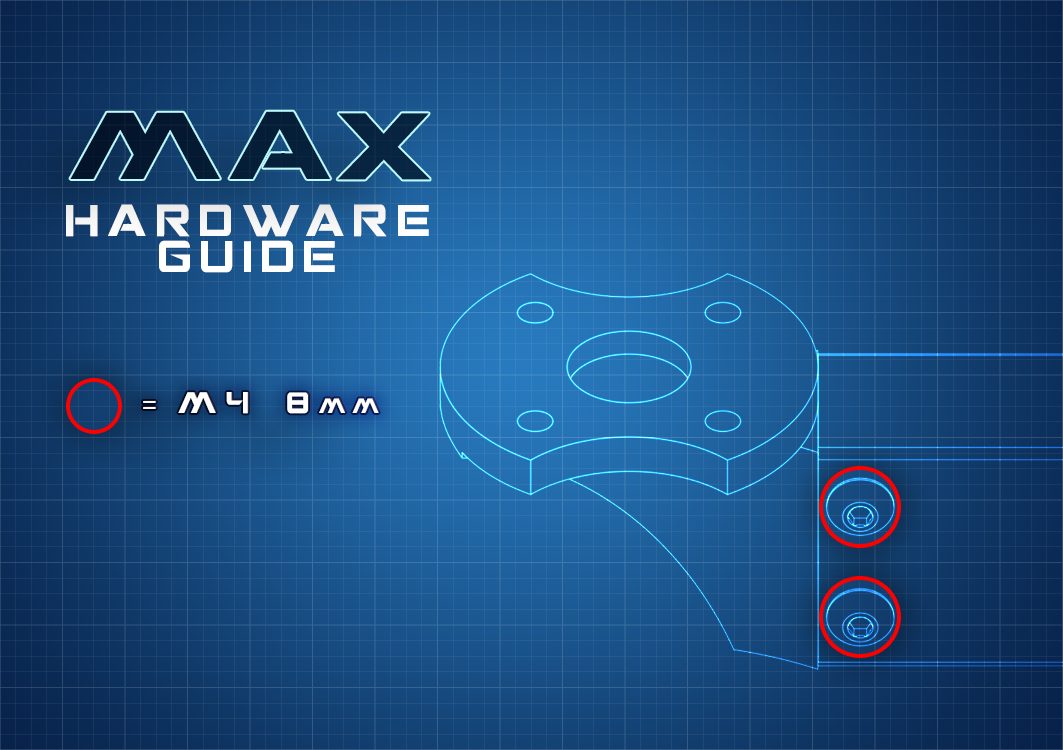
<style>
.page{position:relative;width:1063px;height:750px}
.page>*{position:absolute;margin:0}
.t1{font:96px "CGFLocustResistance";color:#051e37}
.t2{font:45px/36px "CGFLocustResistance";letter-spacing:0.225em;color:#ffffff;scale:0.8 1}
.t3{font:15px "CGFLocustResistance";letter-spacing:0.35em;color:#ffffff;scale:0.8 1}
.t4{font:15px "MyriadPro-Regular";letter-spacing:0.35em;color:#ffffff;scale:0.8 1}
.t5{font:15px "CGFLocustResistance";letter-spacing:0.35em;color:#ffffff;font-variant:small-caps;scale:0.8 1}
</style>
<div class="page">
<p class="t1" style="left:70px;top:111px;width:360px;height:69px">MAX</p>
<p class="t2" style="left:66px;top:204px;width:363px;height:69px;text-align:center">HARDWARE<br>GUIDE</p>
<p class="t3" style="left:143px;top:392px;width:236px;height:22px"><span class="t4">= </span>M4  8<span class="t5">mm</span></p>
</div>
